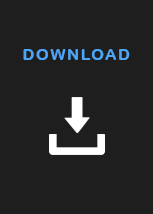
<style>
.page{position:relative;width:153px;height:214px;background:#1e1e1e}
.page>*{position:absolute;margin:0}
.t1{font:16px "ArialRoundedMTBold";letter-spacing:0.1em;color:#4da5f7;text-transform:uppercase}
</style>
<div class="page">
<p class="t1" style="left:23px;top:49px;width:107px;height:11px">DOWNLOAD</p>
</div>
